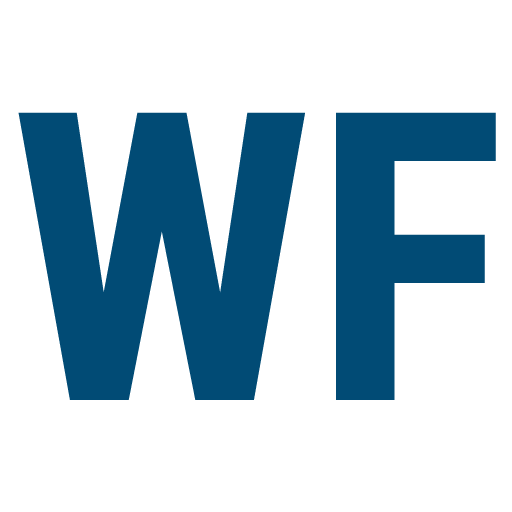
<style>
.page{position:relative;width:512px;height:512px;background:#ffffff}
.page>*{position:absolute;margin:0}
.t1{font:403.9px "RobotoCondensed-Bold";color:#014b75}
</style>
<div class="page">
<p class="t1" style="left:18px;top:112px;width:478px;height:288px">WF</p>
</div>
